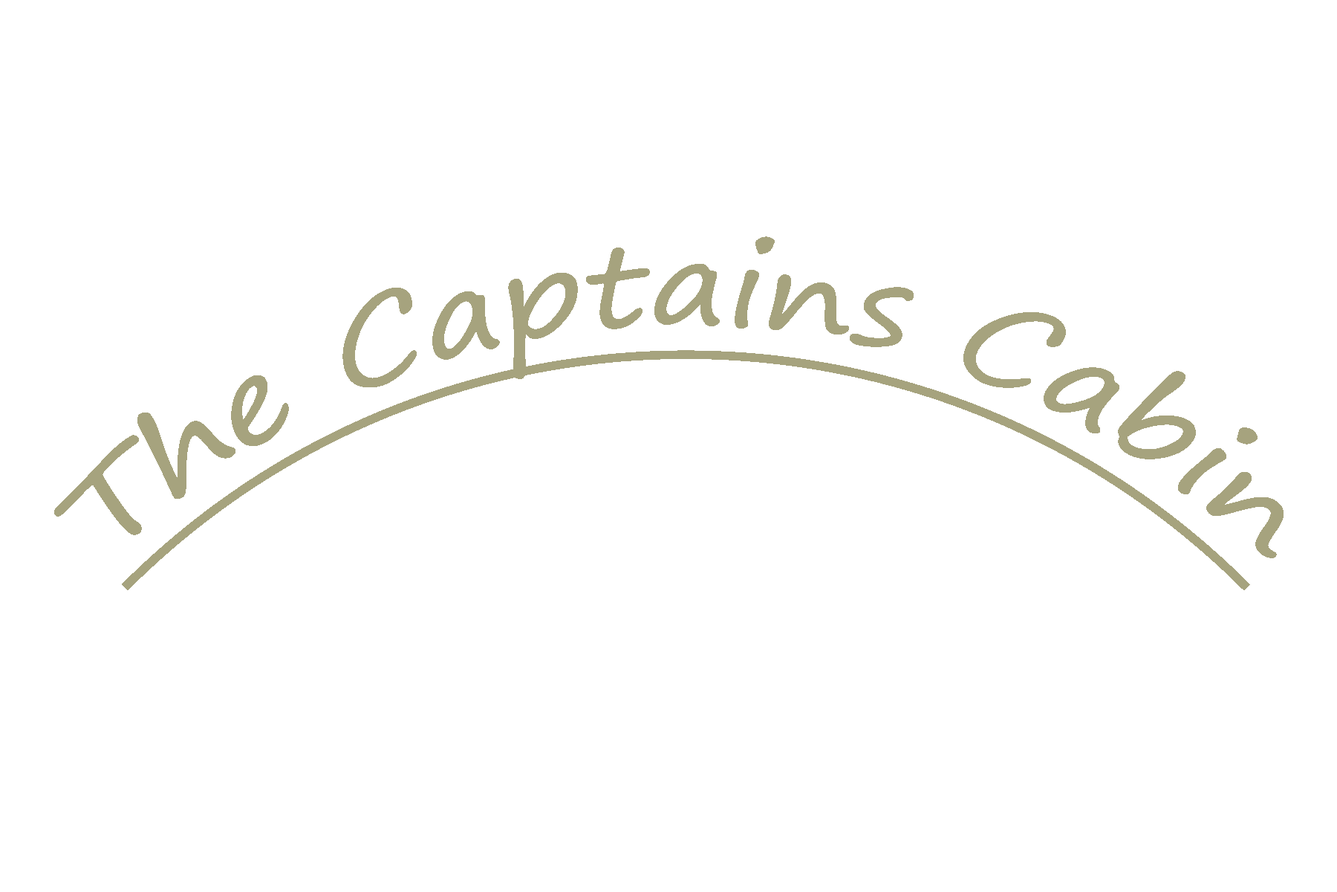
<style>
.page{position:relative;width:1337px;height:892px;background:#ffffff}
.page>*{position:absolute;margin:0}
.t1{font:111.5px "SegoePrint";color:#a6a37e;text-decoration:underline}
</style>
<div class="page">
<p class="t1" style="left:54px;top:236px;width:1230px;height:354px">The Captains Cabin</p>
</div>
